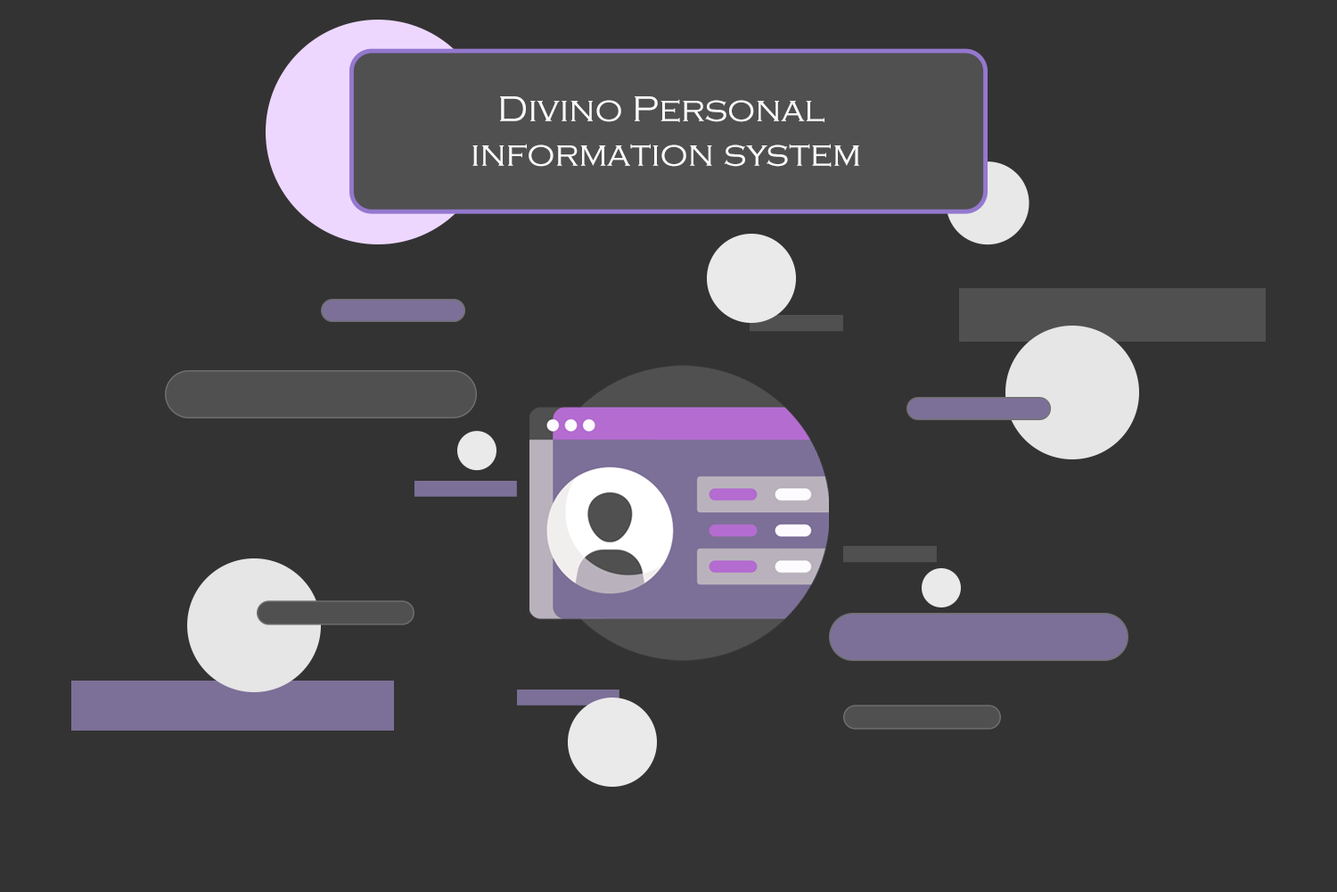
<style>
.page{position:relative;width:1337px;height:892px;background:#333333}
.page>*{position:absolute;margin:0}
.t1{font:37.2px "CopperplateGothic-Light";color:#fafafa}
</style>
<div class="page">
<p class="t1" style="left:473px;top:96px;width:387px;height:71px;text-align:center">Divino Personal <br>information system</p>
</div>
